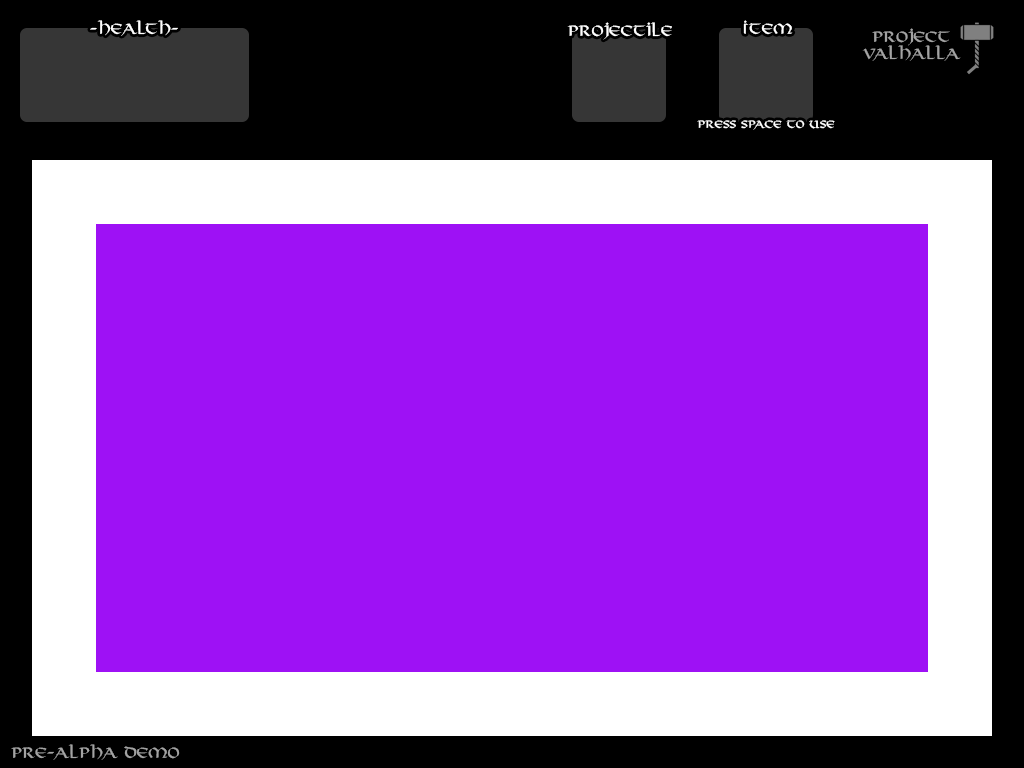
<style>
.page{position:relative;width:1024px;height:768px;background:#9e11f5}
.page>*{position:absolute;margin:0}
.t1{font:14px "Viking-Normal";color:#ffffff}
.t2{font:14px "Viking-Normal";color:#a3a3a3}
.t3{font:10px "Viking-Normal";color:#ffffff}
</style>
<div class="page">
<p class="t1" style="left:90px;top:20px;width:88px;height:16px">-Health-</p>
<p class="t1" style="left:567px;top:22px;width:105px;height:18px">Projectile</p>
<p class="t1" style="left:743px;top:20px;width:50px;height:15px">Item</p>
<p class="t2" style="left:862px;top:28px;width:99px;height:33px;text-align:center">Project<br>Valhalla</p>
<p class="t3" style="left:697px;top:120px;width:138px;height:10px">Press Space to Use</p>
<p class="t2" style="left:11px;top:744px;width:169px;height:16px">Pre-Alpha Demo</p>
</div>
